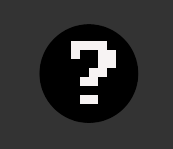
<style>
.page{position:relative;width:173px;height:149px;background:#333333}
.page>*{position:absolute;margin:0}
.t1{font:72px "pixelmix-bold";color:#f7f3f3}
</style>
<div class="page">
<p class="t1" style="left:71px;top:41px;width:45px;height:63px">?</p>
</div>
